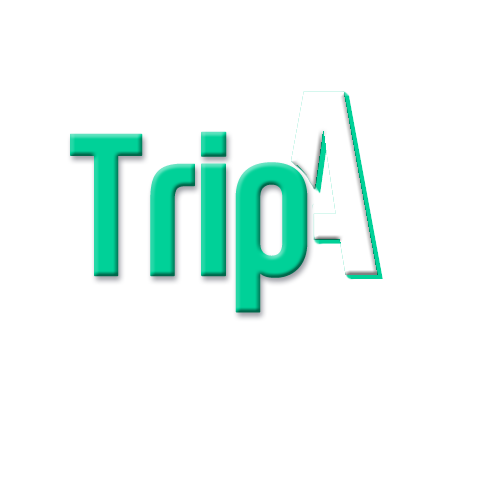
<style>
.page{position:relative;width:500px;height:500px;background:#ffffff}
.page>*{position:absolute;margin:0}
.t1{font:200px "SwaggerTTF";letter-spacing:-0.045em;color:#00d198;font-weight:bold}
</style>
<div class="page">
<p class="t1" style="left:70px;top:131px;width:238px;height:182px">Trip</p>
</div>
